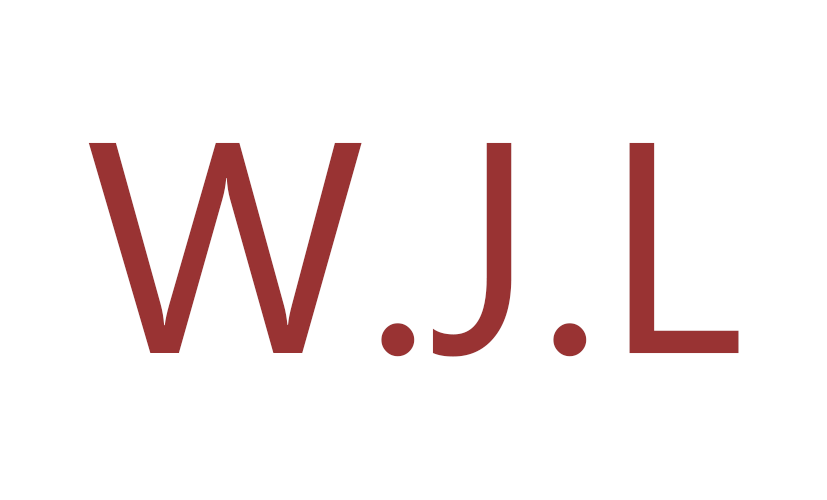
<style>
.page{position:relative;width:827px;height:500px;background:#ffffff}
.page>*{position:absolute;margin:0}
.t1{font:300px "MicrosoftPhagsPa";color:#993333}
</style>
<div class="page">
<p class="t1" style="left:88px;top:142px;width:651px;height:215px">W.J.L</p>
</div>
